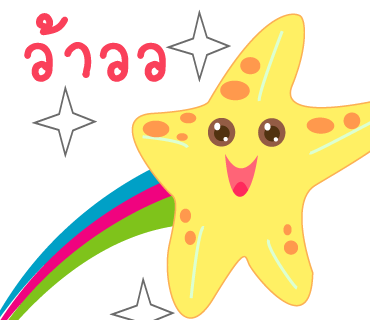
<style>
.page{position:relative;width:370px;height:320px;background:#ffffff}
.page>*{position:absolute;margin:0}
.t1{font:105px "2005_iannnnnMTV";letter-spacing:0.03em;color:#fa405a;scale:1.06 1}
</style>
<div class="page">
<p class="t1" style="left:24px;top:13px;width:142px;height:69px">ว้าวว</p>
</div>
